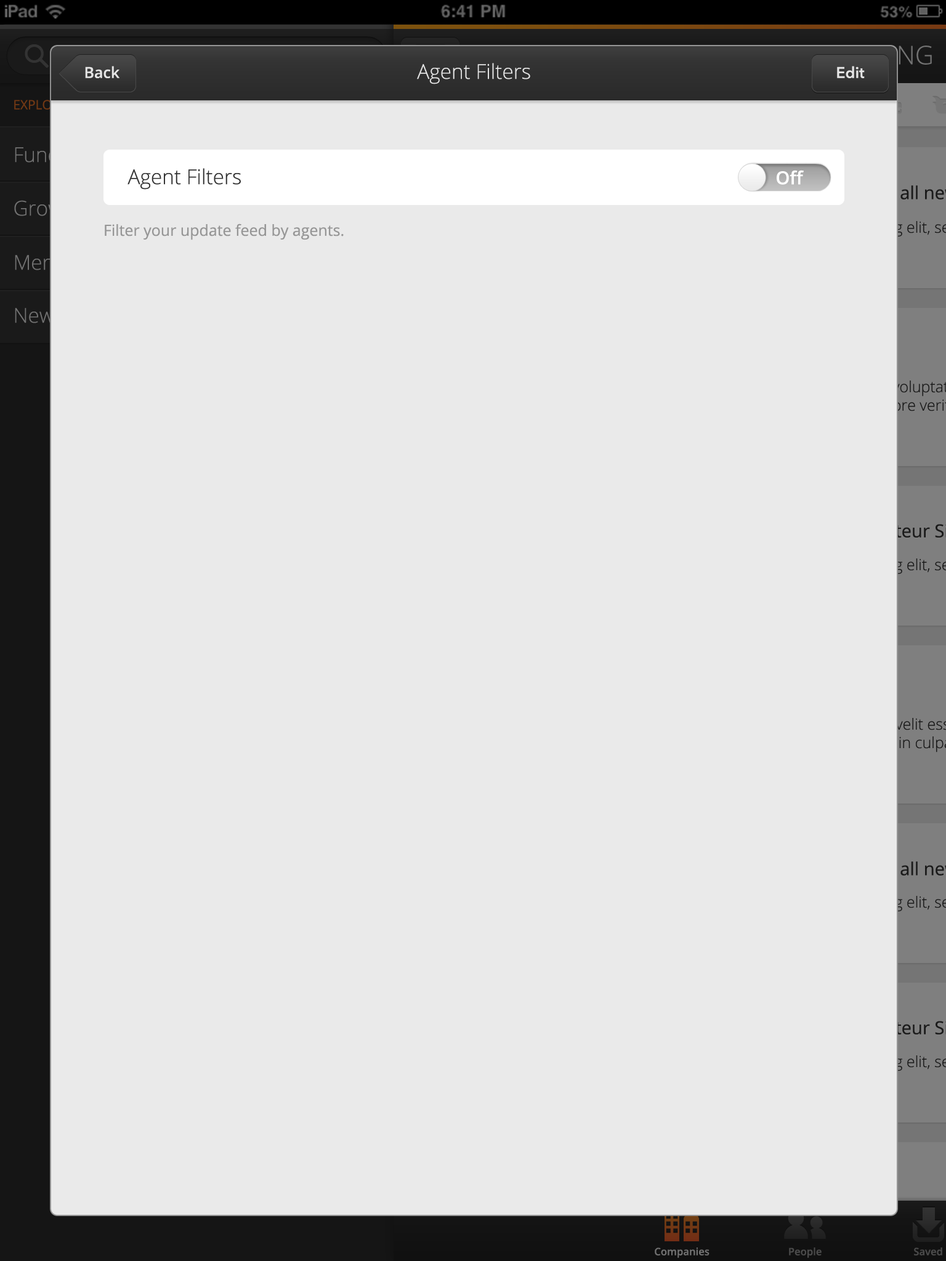
<style>
.page{position:relative;width:946px;height:1261px;background:#eaeaea}
.page>*{position:absolute;margin:0}
.t1{font:15.4px "OpenSans-Semibold";color:#e5e5e5}
.t2{font:20.5px "OpenSans-Light";color:#e5e5e5}
.t3{font:15.4px "AvenirNext-DemiBold";color:#e5e5e5}
.t4{font:20.5px "OpenSans-Light";color:#343434}
.t5{font:18px "OpenSans-Semibold";color:#ffffff}
.t6{font:15.4px "OpenSans";color:#969696}
</style>
<div class="page">
<p class="t1" style="left:85px;top:66px;width:35px;height:12px">Back</p>
<p class="t2" style="left:417px;top:63px;width:113px;height:21px">Agent Filters</p>
<p class="t3" style="left:837px;top:66px;width:27px;height:12px">Edit</p>
<p class="t4" style="left:127px;top:168px;width:114px;height:22px">Agent Filters</p>
<p class="t5" style="left:776px;top:170px;width:27px;height:15px">Off</p>
<p class="t6" style="left:105px;top:223px;width:239px;height:17px">Filter your update feed by agents.</p>
</div>
